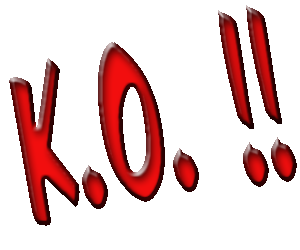
<style>
.page{position:relative;width:300px;height:250px;background:#ffffff}
.page>*{position:absolute;margin:0}
.t1{font:238.1px "FastAction";scale:0.54 1}
</style>
<div class="page">
<p class="t1" style="left:9px;top:5px;width:288px;height:221px;rotate:-10deg">K.O. !!</p>
</div>
